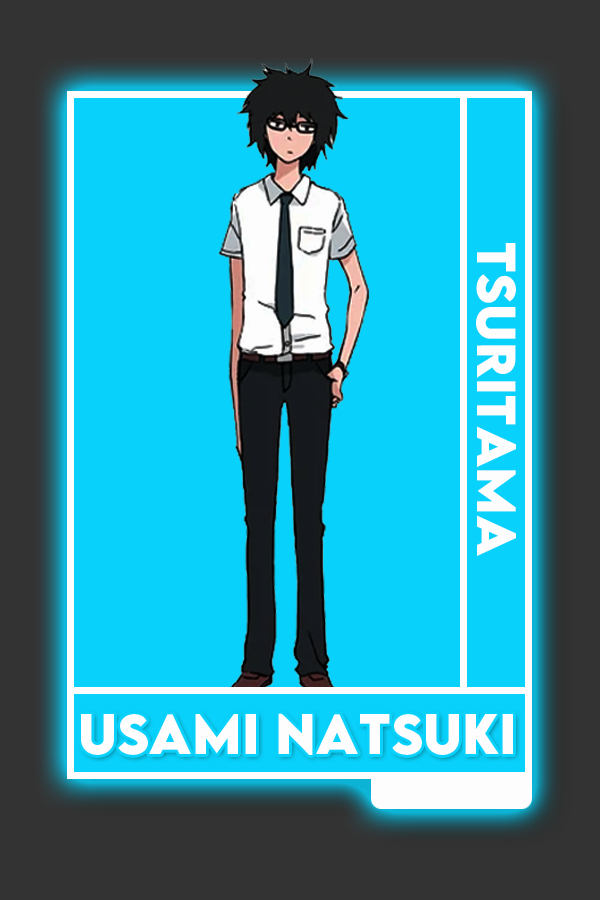
<style>
.page{position:relative;width:600px;height:900px;background:#08d1fc}
.page>*{position:absolute;margin:0}
.t1{font:48.8px "LEMONMILK-Bold";color:#ffffff}
.t2{font:50.5px "LEMONMILK-Bold";color:#ffffff}
</style>
<div class="page">
<p class="t1" style="left:476px;top:243px;width:40px;height:313px;rotate:90deg">TSURITAMA</p>
<p class="t2" style="left:81px;top:713px;width:432px;height:42px">Usami Natsuki</p>
</div>
